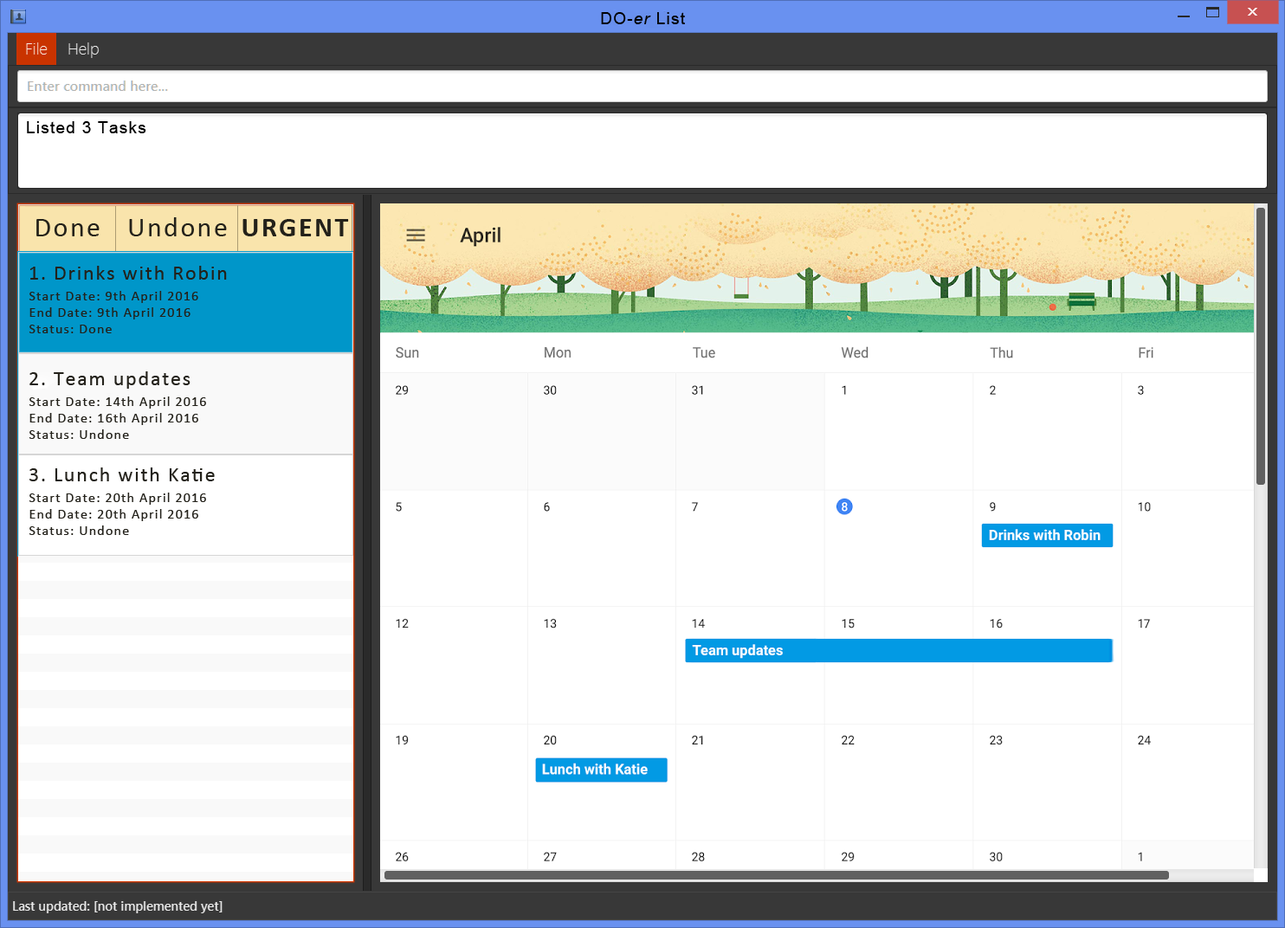
<style>
.page{position:relative;width:1285px;height:928px;background:#ffffff}
.page>*{position:absolute;margin:0}
.t1{font:16.2px "ArialMT";letter-spacing:0.075em;color:#000000}
.t2{font:16.2px "Arial-ItalicMT";letter-spacing:0.075em;color:#000000}
.t3{font:27.7px "Calibri";letter-spacing:0.075em;color:#23211a}
.t4{font:27.7px "Calibri-Bold";letter-spacing:0.075em;color:#23211a}
.t5{font:20.8px "Calibri";letter-spacing:0.075em;color:#23211a}
.t6{font:13.9px "Calibri";letter-spacing:0.075em;color:#23211a}
</style>
<div class="page">
<p class="t1" style="left:601px;top:12px;width:84px;height:12px">DO-<span class="t2">er </span>List</p>
<p class="t1" style="left:27px;top:121px;width:119px;height:12px">Listed 3 Tasks</p>
<p class="t3" style="left:36px;top:219px;width:64px;height:17px">Done</p>
<p class="t3" style="left:129px;top:217px;width:98px;height:19px">Undone</p>
<p class="t4" style="left:242px;top:219px;width:107px;height:17px">URGENT</p>
<p class="t5" style="left:29px;top:266px;width:198px;height:14px">1. Drinks with Robin</p>
<p class="t6" style="left:29px;top:291px;width:169px;height:42px">Start Date: 9th April 2016<br>End Date: 9th April 2016<br>Status: Done</p>
<p class="t5" style="left:29px;top:371px;width:161px;height:18px">2. Team updates</p>
<p class="t6" style="left:29px;top:397px;width:177px;height:42px">Start Date: 14th April 2016<br>End Date: 16th April 2016<br>Status: Undone</p>
<p class="t5" style="left:29px;top:468px;width:186px;height:13px">3. Lunch with Katie</p>
<p class="t6" style="left:29px;top:493px;width:177px;height:42px">Start Date: 20th April 2016<br>End Date: 20th April 2016<br>Status: Undone</p>
</div>
